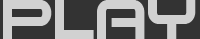
<style>
.page{position:relative;width:200px;height:39px;background:#333333}
.page>*{position:absolute;margin:0}
.t1{font:75px "Bitsumishi";color:#d1d1d1}
</style>
<div class="page">
<p class="t1" style="left:3px;top:0px;width:193px;height:39px">Play</p>
</div>
